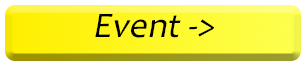
<style>
.page{position:relative;width:306px;height:66px}
.page>*{position:absolute;margin:0}
.t1{font:36px "Candara";color:#010101;font-style:italic}
</style>
<div class="page">
<p class="t1" style="left:95px;top:14px;width:119px;height:24px">Event -&gt;</p>
</div>
